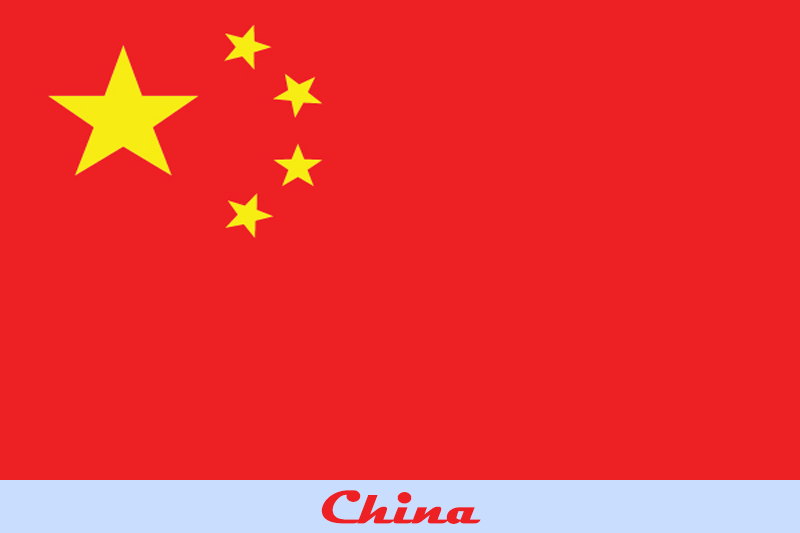
<style>
.page{position:relative;width:800px;height:533px;background:#ed2124}
.page>*{position:absolute;margin:0}
.t1{font:48px "Magneto-Bold";color:#ed2124;scale:1.08 1}
</style>
<div class="page">
<p class="t1" style="left:321px;top:490px;width:160px;height:34px">China</p>
</div>
